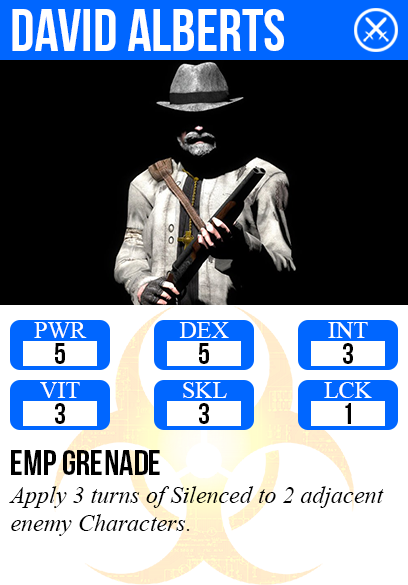
<style>
.page{position:relative;width:408px;height:585px;background:#ffffff}
.page>*{position:absolute;margin:0}
.t1{font:60px "BebasNeue";color:#ffffff}
.t2{font:24px "TimesNewRomanPSMT";color:#ffffff}
.t3{font:30px "BebasNeue";color:#000000}
.t4{font:36px "BebasNeue";color:#000000}
.t5{font:24px "TimesNewRomanPS-ItalicMT";color:#000000}
</style>
<div class="page">
<p class="t1" style="left:12px;top:9px;width:272px;height:42px">david alberts</p>
<p class="t2" style="left:34px;top:322px;width:53px;height:16px">PWR</p>
<p class="t2" style="left:179px;top:322px;width:50px;height:16px">DEX</p>
<p class="t2" style="left:328px;top:322px;width:40px;height:17px">INT</p>
<p class="t3" style="left:55px;top:343px;width:10px;height:21px">5</p>
<p class="t3" style="left:199px;top:343px;width:10px;height:21px">5</p>
<p class="t3" style="left:343px;top:343px;width:10px;height:21px">3</p>
<p class="t2" style="left:40px;top:382px;width:40px;height:16px">VIT</p>
<p class="t2" style="left:183px;top:382px;width:44px;height:16px">SKL</p>
<p class="t2" style="left:324px;top:382px;width:48px;height:16px">LCK</p>
<p class="t3" style="left:55px;top:403px;width:10px;height:21px">3</p>
<p class="t3" style="left:199px;top:403px;width:10px;height:21px">3</p>
<p class="t3" style="left:345px;top:403px;width:6px;height:21px">1</p>
<p class="t4" style="left:11px;top:450px;width:149px;height:25px">emp grenade</p>
<p class="t5" style="left:9px;top:486px;width:375px;height:50px">Apply 3 turns of Silenced to 2 adjacent<br>enemy Characters.</p>
</div>
